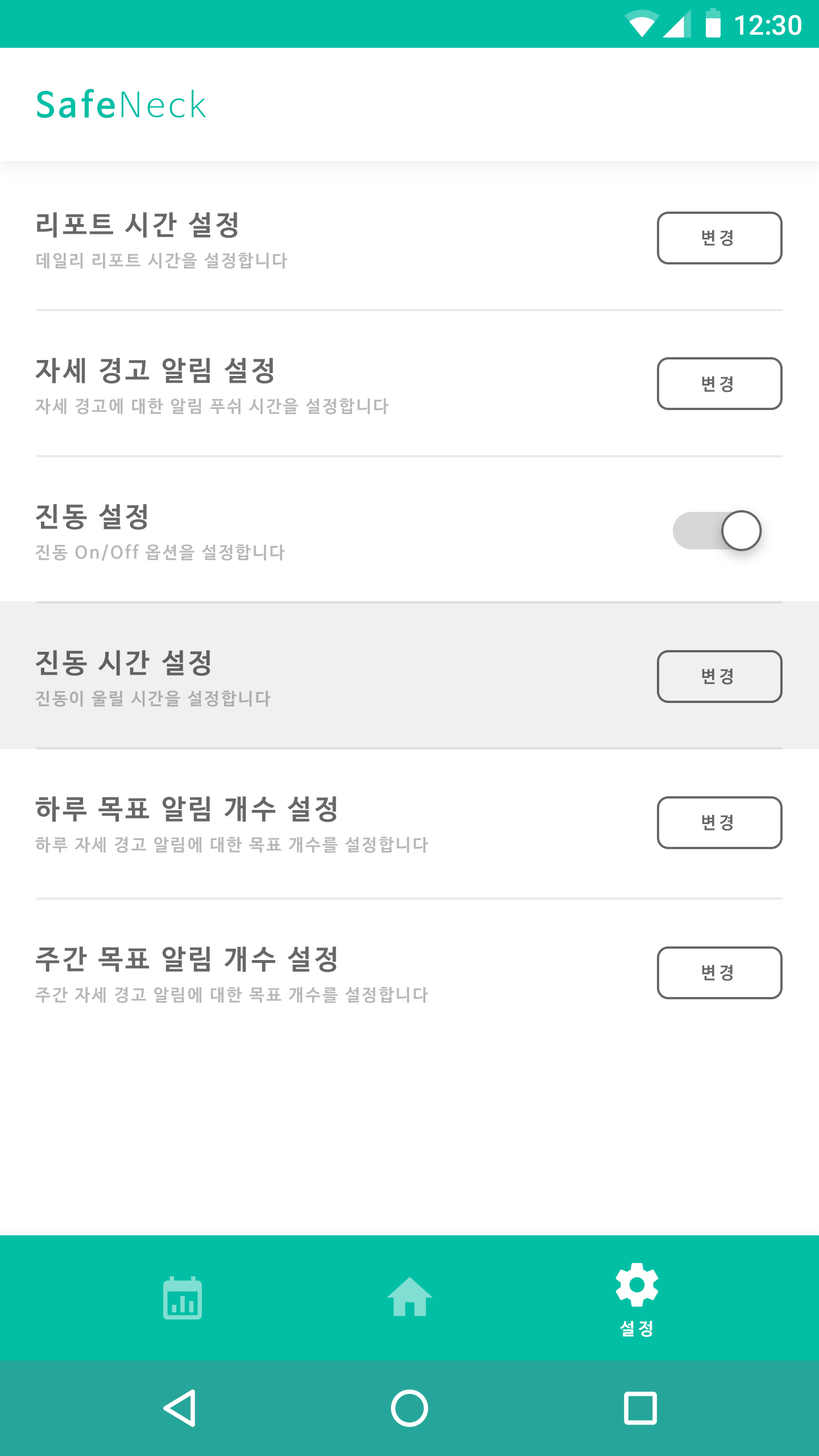
<style>
.page{position:relative;width:819px;height:1456px;background:#ffffff}
.page>*{position:absolute;margin:0}
.t1{font:27.3px "Roboto-Medium";color:#ffffff}
.t2{font:34.1px "NanumBarunGothicBold";letter-spacing:0.1em;color:#00bfa5}
.t3{font:34.1px "NanumBarunGothicLight";letter-spacing:0.1em;color:#00bfa5}
.t4{font:27.3px "NanumBarunGothicBold";letter-spacing:0.1em;color:#676767}
.t5{font:16.9px "NanumBarunGothicBold";letter-spacing:0.2em;color:#676767}
.t6{font:17.1px "NanumBarunGothicBold";letter-spacing:0.1em;color:#b8b8b8}
.t7{font:17px "NanumBarunGothicBold";letter-spacing:0.2em;color:#fffefe}
</style>
<div class="page">
<p class="t1" style="left:735px;top:15px;width:66px;height:20px">12:30</p>
<p class="t2" style="left:37px;top:89px;width:169px;height:29px">Safe<span class="t3">Neck</span></p>
<p class="t4" style="left:37px;top:212px;width:201px;height:26px">리포트 시간 설정</p>
<p class="t5" style="left:702px;top:230px;width:31px;height:16px">변경</p>
<p class="t6" style="left:36px;top:253px;width:251px;height:16px">데일리 리포트 시간을 설정합니다</p>
<p class="t4" style="left:35px;top:358px;width:239px;height:26px">자세 경고 알림 설정</p>
<p class="t5" style="left:702px;top:376px;width:31px;height:16px">변경</p>
<p class="t6" style="left:35px;top:398px;width:353px;height:17px">자세 경고에 대한 알림 푸쉬 시간을 설정합니다</p>
<p class="t4" style="left:35px;top:504px;width:112px;height:26px">진동 설정</p>
<p class="t6" style="left:35px;top:544px;width:250px;height:17px">진동 On/Off 옵션을 설정합니다</p>
<p class="t4" style="left:35px;top:650px;width:175px;height:26px">진동 시간 설정</p>
<p class="t5" style="left:702px;top:668px;width:31px;height:17px">변경</p>
<p class="t6" style="left:35px;top:690px;width:236px;height:17px">진동이 울릴 시간을 설정합니다</p>
<p class="t4" style="left:35px;top:796px;width:302px;height:26px">하루 목표 알림 개수 설정</p>
<p class="t5" style="left:702px;top:814px;width:31px;height:17px">변경</p>
<p class="t6" style="left:35px;top:837px;width:393px;height:16px">하루 자세 경고 알림에 대한 목표 개수를 설정합니다</p>
<p class="t4" style="left:36px;top:946px;width:301px;height:27px">주간 목표 알림 개수 설정</p>
<p class="t5" style="left:702px;top:965px;width:31px;height:16px">변경</p>
<p class="t6" style="left:35px;top:987px;width:393px;height:16px">주간 자세 경고 알림에 대한 목표 개수를 설정합니다</p>
<p class="t7" style="left:619px;top:1321px;width:33px;height:16px">설정</p>
</div>
